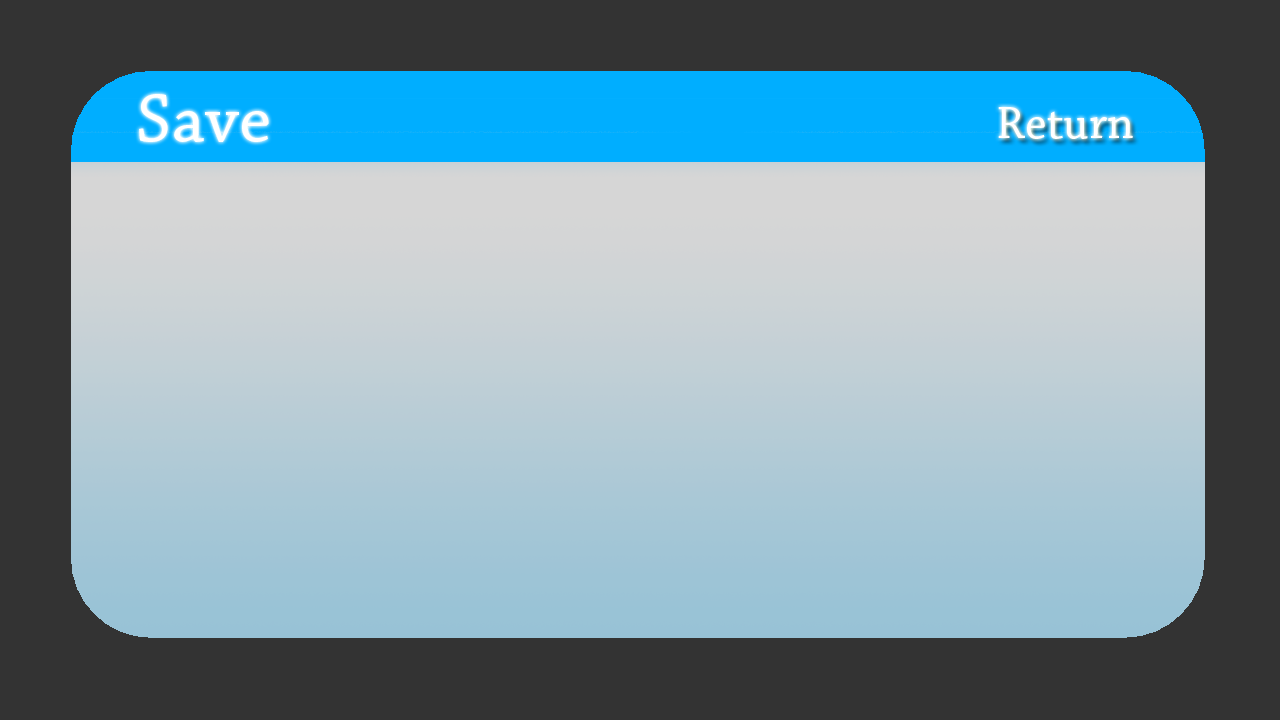
<style>
.page{position:relative;width:1280px;height:720px;background:#333333}
.page>*{position:absolute;margin:0}
.t1{font:72px "ChaparralPro-Regular";color:#ffffff}
.t2{font:48px "ChaparralPro-Regular";color:#ffffff}
</style>
<div class="page">
<p class="t1" style="left:139px;top:94px;width:130px;height:48px">Save</p>
<p class="t2" style="left:998px;top:107px;width:135px;height:32px">Return</p>
</div>
